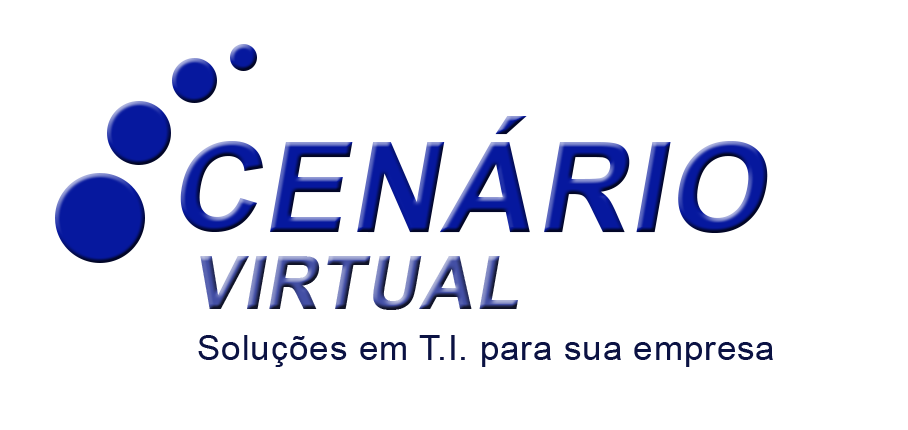
<style>
.page{position:relative;width:908px;height:430px;background:#ffffff}
.page>*{position:absolute;margin:0}
.t1{font:125px "Arial-BoldMT";letter-spacing:0.025em;font-style:italic}
.t2{font:73px "Arial-BoldMT";letter-spacing:0.025em;font-style:italic}
.t3{font:35px "ArialMT";letter-spacing:0.025em;color:#0b1243}
</style>
<div class="page">
<p class="t1" style="left:180px;top:116px;width:588px;height:117px">CENÁRIO</p>
<p class="t2" style="left:200px;top:256px;width:318px;height:54px">VIRTUAL</p>
<p class="t3" style="left:198px;top:335px;width:575px;height:32px">Soluções em T.I. para sua empresa</p>
</div>
